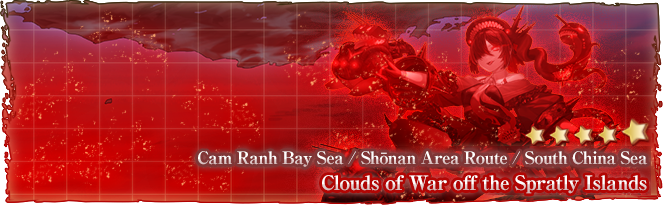
<style>
.page{position:relative;width:663px;height:205px}
.page>*{position:absolute;margin:0}
.t1{font:17px "RyuminPro-ExBold";letter-spacing:-0.04em}
.t2{font:20px "RyuminPro-ExBold";letter-spacing:-0.04em}
</style>
<div class="page">
<p class="t1" style="left:198px;top:151px;width:450px;height:16px">Cam Ranh Bay Sea / Shōnan Area Route / South China Sea</p>
<p class="t2" style="left:322px;top:175px;width:325px;height:19px">Clouds of War off the Spratly Islands</p>
</div>
